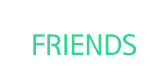
<style>
.page{position:relative;width:161px;height:81px;background:#ffffff}
.page>*{position:absolute;margin:0}
.t1{font:28.8px "SeoulNamsanB";color:#30d794}
</style>
<div class="page">
<p class="t1" style="left:33px;top:34px;width:104px;height:22px">FRIENDS</p>
</div>
